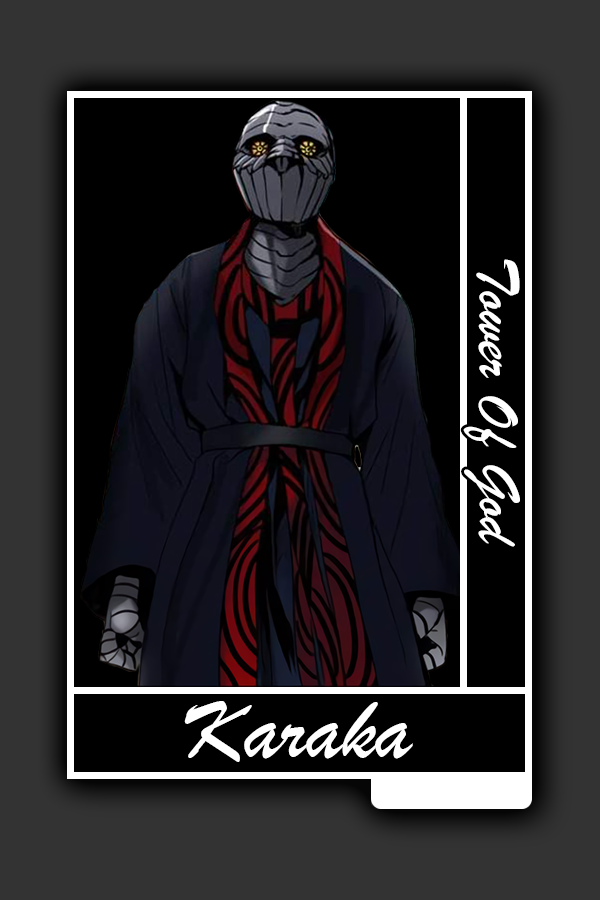
<style>
.page{position:relative;width:600px;height:900px;background:#000000}
.page>*{position:absolute;margin:0}
.t1{font:61.5px "BrushScriptMT";color:#ffffff}
.t2{font:89.7px "BrushScriptMT";color:#ffffff}
</style>
<div class="page">
<p class="t1" style="left:463px;top:259px;width:57px;height:288px;rotate:90deg">Tower Of God</p>
<p class="t2" style="left:184px;top:701px;width:229px;height:61px">Karaka</p>
</div>
